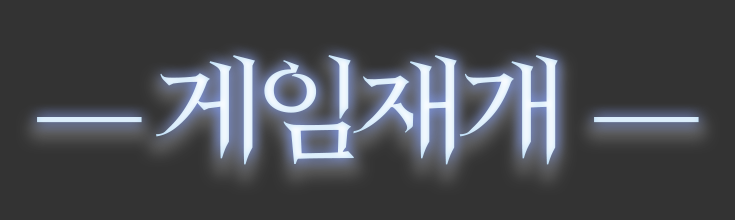
<style>
.page{position:relative;width:735px;height:220px;background:#333333}
.page>*{position:absolute;margin:0}
.t1{font:110px "HeirofLightRegular";letter-spacing:-0.1em;color:#e6f3fc;scale:1.03 1}
</style>
<div class="page">
<p class="t1" style="left:37px;top:55px;width:662px;height:110px">― 게임재개  ―</p>
</div>
